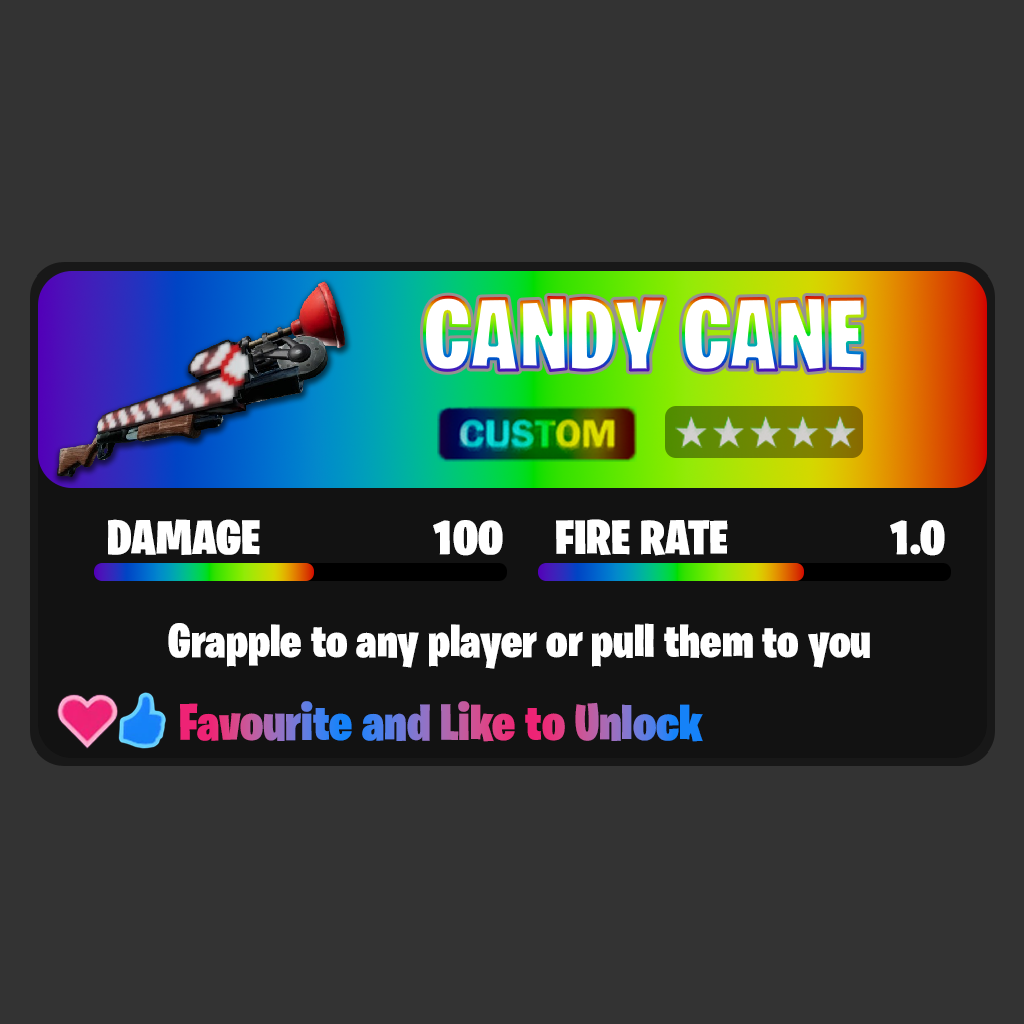
<style>
.page{position:relative;width:1024px;height:1024px;background:#333333}
.page>*{position:absolute;margin:0}
.t1{font:100.8px "BurbankBigCondensed-Black";color:#ffffff}
.t2{font:48.4px "BurbankBigCondensed-Black";color:#ffffff;scale:1.1 1}
.t3{font:48.3px "BurbankBigCondensed-Black";color:#ffffff;scale:1.1 1}
.t4{font:48px "BurbankBigCondensed-Black";color:#ffffff}
.t5{font:51.9px "BurbankBigCondensed-Black"}
</style>
<div class="page">
<p class="t1" style="left:424px;top:296px;width:439px;height:75px">CANDY CANE</p>
<p class="t2" style="left:108px;top:519px;width:152px;height:36px">DAMAGE</p>
<p class="t2" style="left:433px;top:520px;width:70px;height:36px">100</p>
<p class="t3" style="left:556px;top:519px;width:172px;height:37px">FIRE RATE</p>
<p class="t3" style="left:890px;top:520px;width:55px;height:36px">1.0</p>
<p class="t4" style="left:168px;top:623px;width:702px;height:46px">Grapple to any player or pull them to you</p>
<p class="t5" style="left:180px;top:701px;width:523px;height:41px">Favourite and Like to Unlock</p>
</div>
